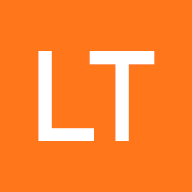
<style>
.page{position:relative;width:192px;height:192px;background:#ff761b}
.page>*{position:absolute;margin:0}
.t1{font:130px "ExpresswayRg-Regular";color:#ffffff}
</style>
<div class="page">
<p class="t1" style="left:38px;top:51px;width:117px;height:90px">LT</p>
</div>
